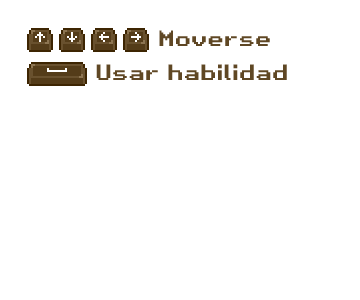
<style>
.page{position:relative;width:360px;height:300px;background:#ffffff}
.page>*{position:absolute;margin:0}
.t1{font:21.3px "RetroGaming";color:#5f4724}
</style>
<div class="page">
<p class="t1" style="left:159px;top:30px;width:111px;height:16px">Moverse</p>
<p class="t1" style="left:96px;top:64px;width:191px;height:16px">Usar habilidad</p>
</div>
